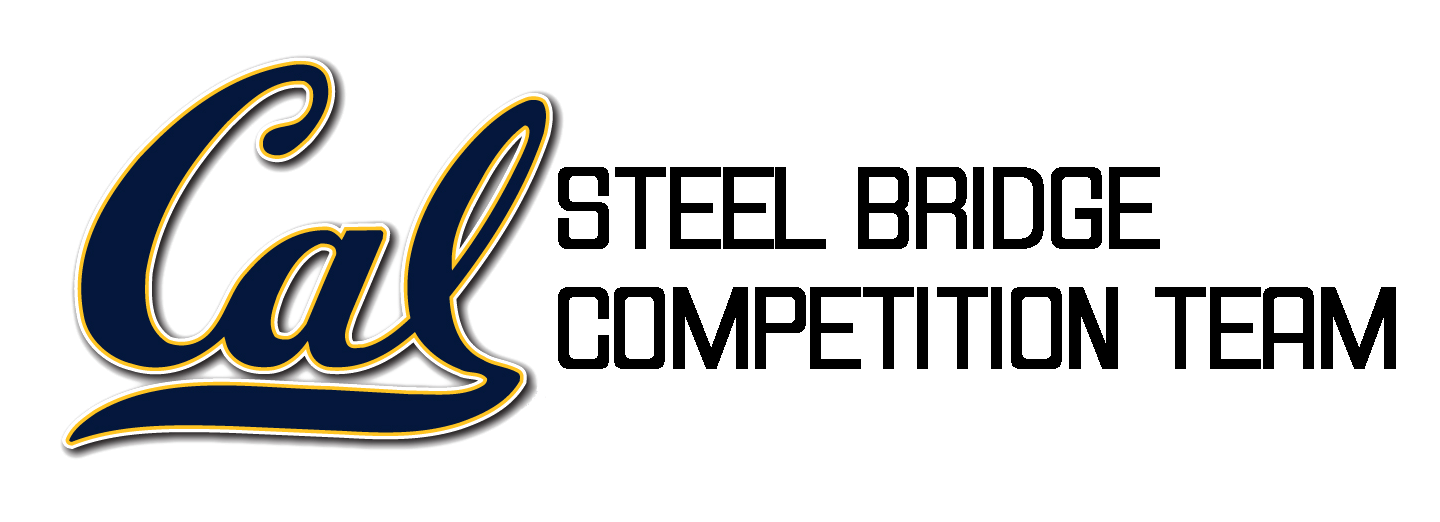
<style>
.page{position:relative;width:1440px;height:522px;background:#ffffff}
.page>*{position:absolute;margin:0}
.t1{font:100px "HallandaleSquareJL";color:#000000;font-weight:bold}
</style>
<div class="page">
<p class="t1" style="left:558px;top:167px;width:838px;height:202px">STEEL BRIDGE<br>COMPETITION TEAM</p>
</div>
